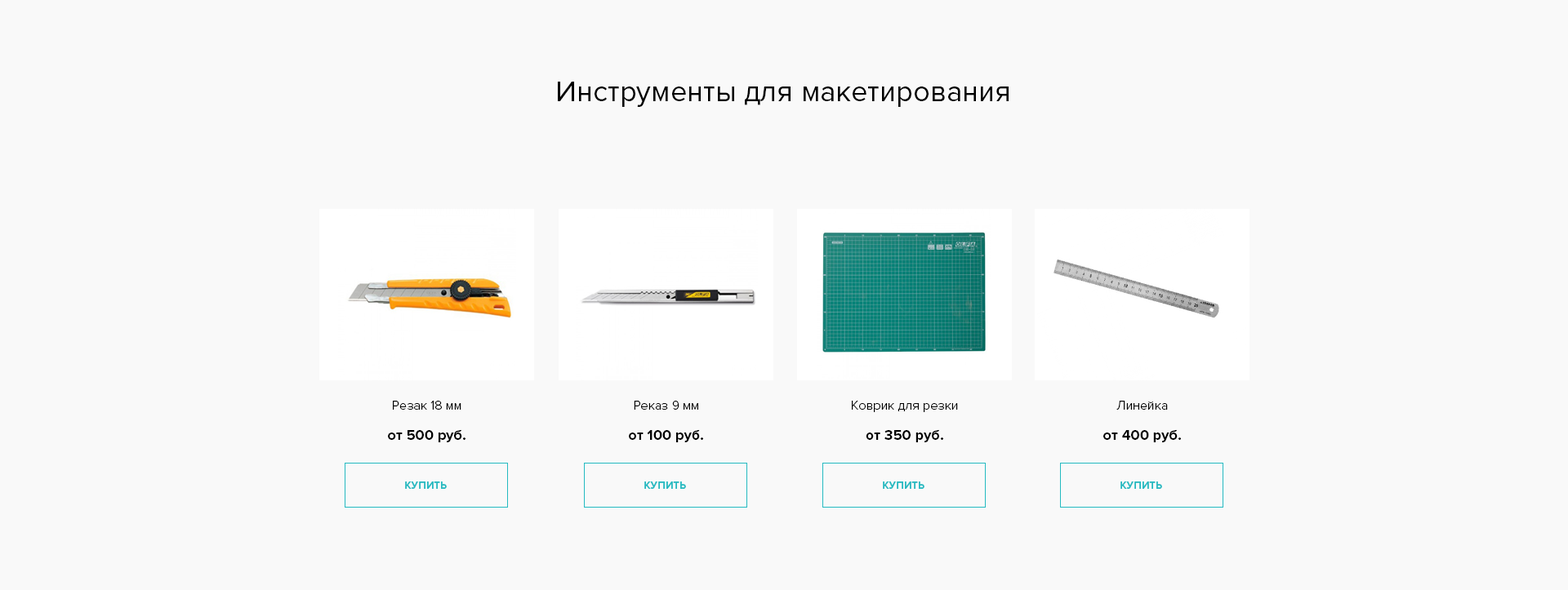
<style>
.page{position:relative;width:1568px;height:590px;background:#f9f9f9}
.page>*{position:absolute;margin:0}
.t1{font:29.4px "ProximaNova-Regular";color:#000000}
.t2{font:13.1px "ProximaNova-Light";color:#000000}
.t3{font:14.7px "ProximaNova-Bold";color:#000000}
.t4{font:10.6px "ProximaNova-Bold";color:#23bac1;text-transform:uppercase}
</style>
<div class="page">
<p class="t1" style="left:558px;top:82px;width:451px;height:25px">Инструменты для макетирования</p>
<p class="t2" style="left:393px;top:401px;width:68px;height:9px">Резак 18 мм</p>
<p class="t2" style="left:634px;top:401px;width:64px;height:9px">Реказ 9 мм</p>
<p class="t2" style="left:852px;top:401px;width:106px;height:11px">Коврик для резки</p>
<p class="t2" style="left:1116px;top:401px;width:52px;height:9px">Линейка</p>
<p class="t3" style="left:388px;top:430px;width:78px;height:13px">от 500 руб.</p>
<p class="t3" style="left:629px;top:430px;width:74px;height:13px">от 100 руб.</p>
<p class="t3" style="left:866px;top:430px;width:77px;height:13px">от 350 руб.</p>
<p class="t3" style="left:1103px;top:430px;width:78px;height:13px">от 400 руб.</p>
<p class="t4" style="left:405px;top:482px;width:42px;height:7px">купить</p>
<p class="t4" style="left:644px;top:482px;width:42px;height:7px">купить</p>
<p class="t4" style="left:883px;top:482px;width:41px;height:7px">купить</p>
<p class="t4" style="left:1120px;top:482px;width:42px;height:7px">купить</p>
</div>
